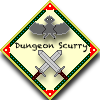
<style>
.page{position:relative;width:100px;height:100px;background:#ffffff}
.page>*{position:absolute;margin:0}
.t1{font:7.9px "Chalkduster";letter-spacing:0.01em;color:#000000}
</style>
<div class="page">
<p class="t1" style="left:14px;top:42px;width:74px;height:11px">Dungeon Scurry</p>
</div>
